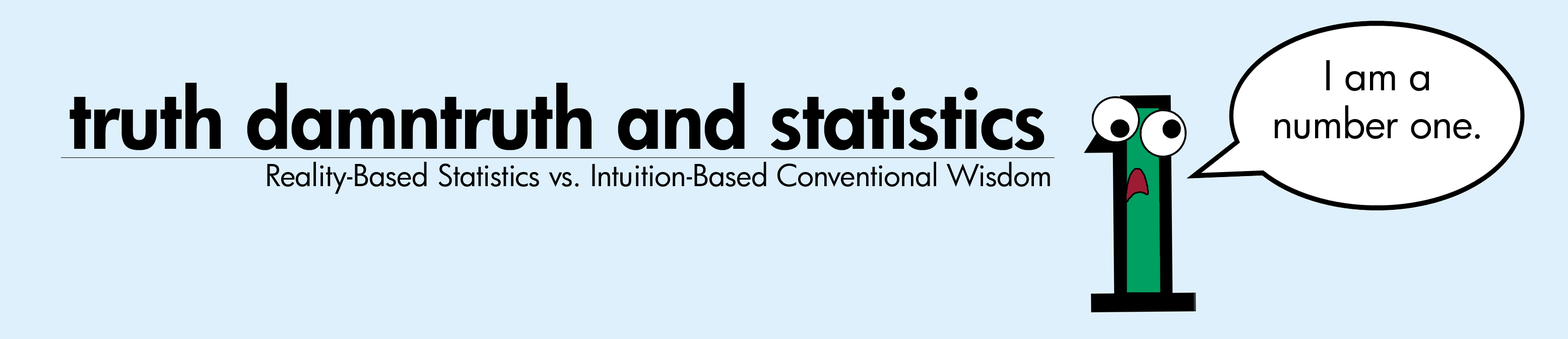
<style>
.page{position:relative;width:1568px;height:339px;background:#def0fc}
.page>*{position:absolute;margin:0}
.t1{font:39.9px "FuturaBk";letter-spacing:-0.01em;color:#000000}
.t2{font:79.8px "FuturaHv";letter-spacing:-0.01em;color:#000000}
.t3{font:29.4px "FuturaBk";letter-spacing:-0.01em;color:#000000}
</style>
<div class="page">
<p class="t1" style="left:1275px;top:60px;width:205px;height:79px;text-align:center">I am a <br>number one.</p>
<p class="t2" style="left:70px;top:83px;width:974px;height:67px">truth damntruth and statistics</p>
<p class="t3" style="left:267px;top:161px;width:783px;height:33px">Reality-Based Statistics vs. Intuition-Based Conventional Wisdom</p>
</div>
